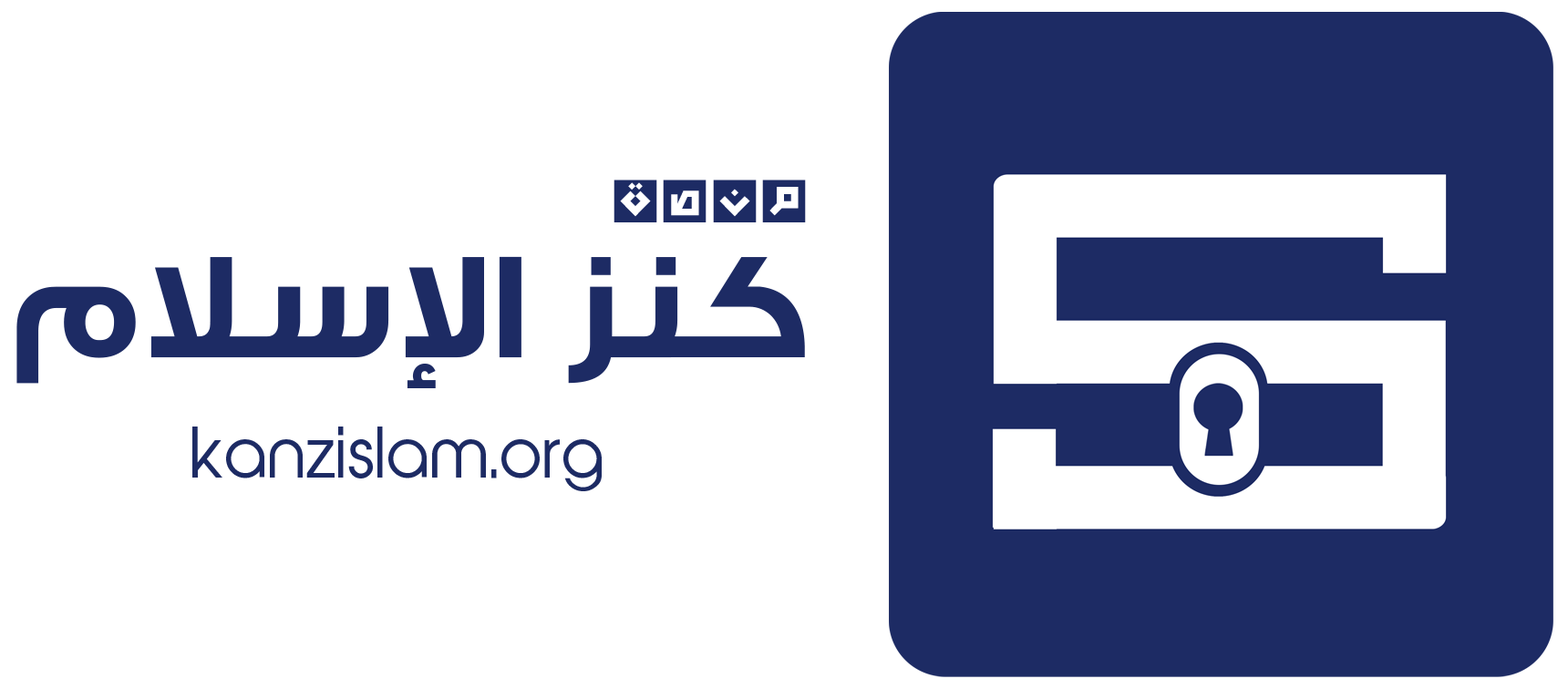
<style>
.page{position:relative;width:1568px;height:689px;background:#ffffff}
.page>*{position:absolute;margin:0}
.t1{font:65.6px "GEBox-Bold";color:#1d2b64}
.t2{font:155.6px "GESSTwoBold-Bold";color:#1d2b64}
.t3{font:65.6px "AbeatbyKai";color:#1d2b64}
</style>
<div class="page">
<p class="t1" style="left:614px;top:180px;width:192px;height:42px">منصة</p>
<p class="t2" style="left:16px;top:256px;width:789px;height:132px">كنز الإسلام</p>
<p class="t3" style="left:192px;top:427px;width:410px;height:64px">kanzislam.org</p>
</div>
